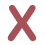
<style>
.page{position:relative;width:45px;height:45px;background:#ffffff}
.page>*{position:absolute;margin:0}
.t1{font:50px "ArialRoundedMTBold";color:#a75157}
</style>
<div class="page">
<p class="t1" style="left:7px;top:5px;width:30px;height:36px">X</p>
</div>
